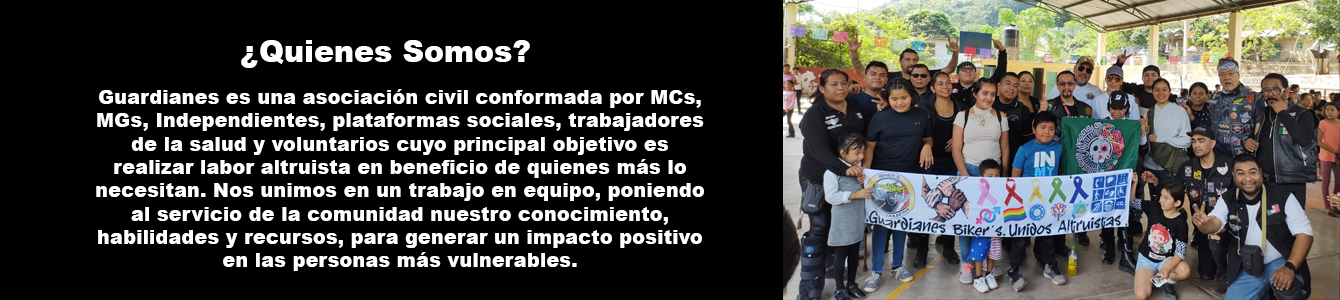
<style>
.page{position:relative;width:1340px;height:300px;background:#000000}
.page>*{position:absolute;margin:0}
.t1{font:30px "Arial-Black";color:#ffffff}
.t2{font:19.4px "Arial-Black";color:#ffffff}
</style>
<div class="page">
<p class="t1" style="left:241px;top:40px;width:289px;height:28px">¿Quienes Somos?</p>
<p class="t2" style="left:96px;top:89px;width:608px;height:182px;text-align:center">Guardianes es una asociación civil conformada por MCs, MGs, Independientes, plataformas sociales, trabajadores de la salud y voluntarios cuyo principal objetivo es realizar labor altruista en beneficio de quienes más lo necesitan. Nos unimos en un trabajo en equipo, poniendo al servicio de la comunidad nuestro conocimiento, habilidades y recursos, para generar un impacto positivo en las personas más vulnerables.</p>
</div>
